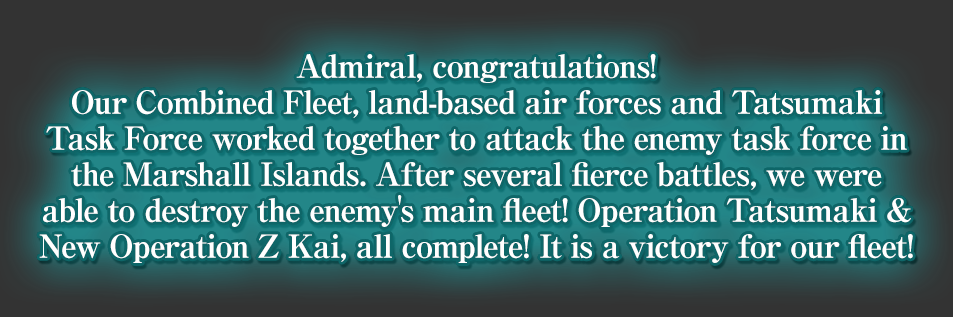
<style>
.page{position:relative;width:953px;height:317px}
.page>*{position:absolute;margin:0}
.t1{font:32px/36px "RyuminPro-ExBold";letter-spacing:-0.04em;color:#ffffff}
</style>
<div class="page">
<p class="t1" style="left:39px;top:54px;width:874px;height:209px;text-align:center">Admiral, congratulations!<br>Our Combined Fleet, land-based air forces and Tatsumaki<br>Task Force worked together to attack the enemy task force in<br>the Marshall Islands. After several fierce battles, we were<br>able to destroy the enemy's main fleet! Operation Tatsumaki &amp;<br>New Operation Z Kai, all complete! It is a victory for our fleet!</p>
</div>
